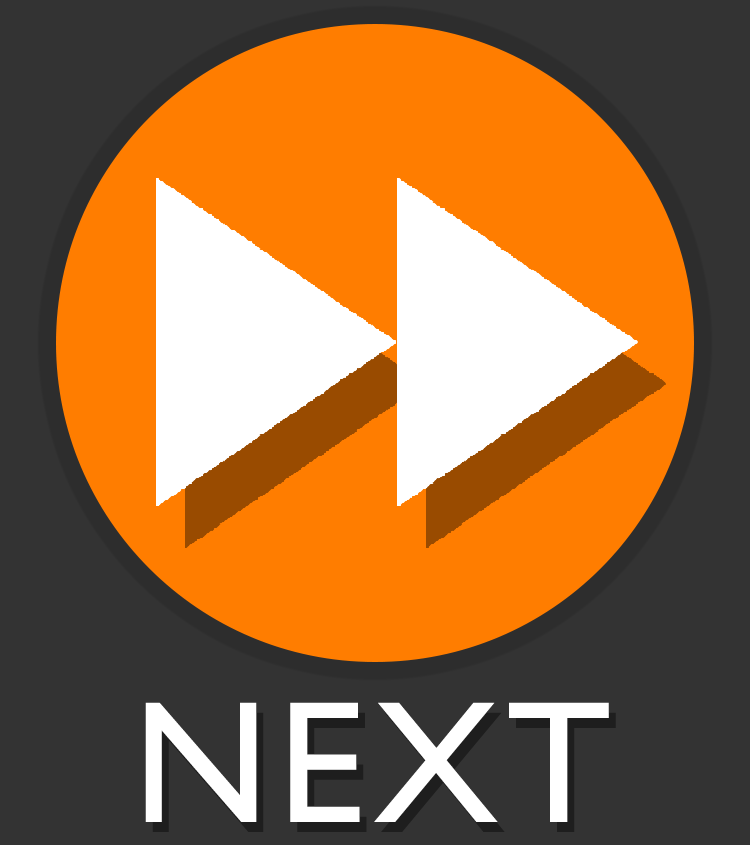
<style>
.page{position:relative;width:750px;height:845px;background:#333333}
.page>*{position:absolute;margin:0}
.t1{font:175px "GillSansMT";letter-spacing:0.05em;color:#ffffff}
</style>
<div class="page">
<p class="t1" style="left:145px;top:702px;width:464px;height:120px">NEXT</p>
</div>
